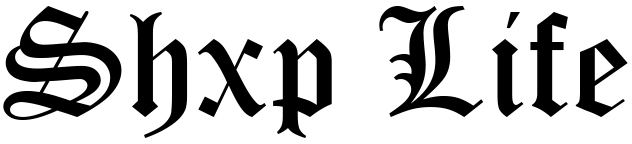
<style>
.page{position:relative;width:632px;height:144px;background:#ffffff}
.page>*{position:absolute;margin:0}
.t1{font:150px "OldEnglishTextMT";color:#000000}
</style>
<div class="page">
<p class="t1" style="left:3px;top:6px;width:625px;height:132px">Shxp Life</p>
</div>
